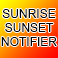
<style>
.page{position:relative;width:58px;height:58px}
.page>*{position:absolute;margin:0}
.t1{font:12px "ArialMT";color:#000000}
</style>
<div class="page">
<p class="t1" style="left:1px;top:9px;width:56px;height:37px;text-align:center">SUNRISE<br>SUNSET<br>NOTIFIER</p>
</div>
